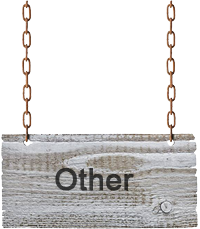
<style>
.page{position:relative;width:200px;height:229px;background:#ffffff}
.page>*{position:absolute;margin:0}
.t1{font:30px "ArialMT";color:#333232;font-weight:bold}
</style>
<div class="page">
<p class="t1" style="left:55px;top:168px;width:79px;height:23px">Other</p>
</div>
